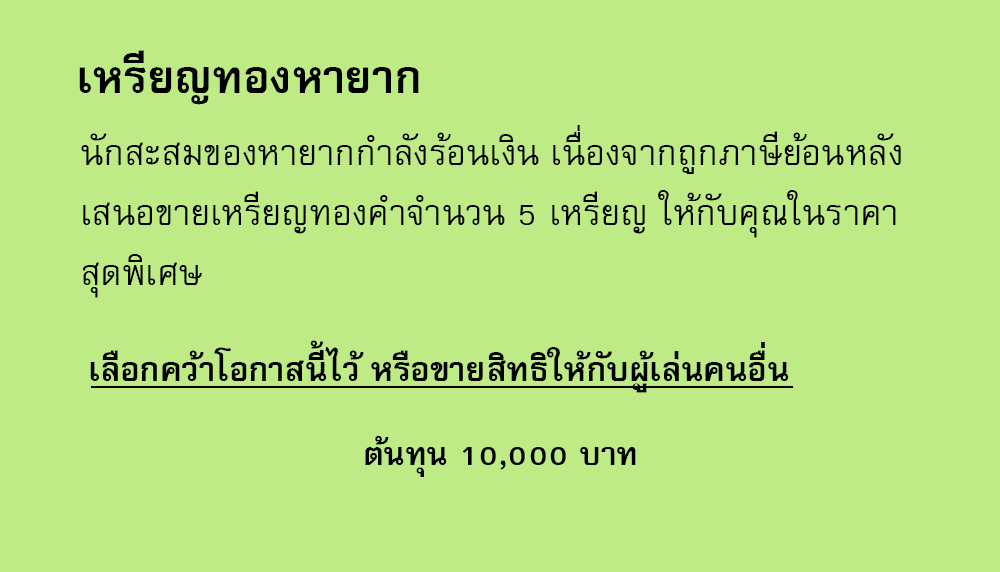
<style>
.page{position:relative;width:1000px;height:572px;background:#beeb85}
.page>*{position:absolute;margin:0}
.t1{font:64px "FreesiaUPCBold";color:#000000}
.t2{font:50px/60px "FreesiaUPC";color:#000000}
.t3{font:47px "FreesiaUPCBold";color:#000000}
.t4{font:45px "FreesiaUPCBold";color:#000000}
</style>
<div class="page">
<p class="t1" style="left:79px;top:50px;width:340px;height:55px">เหรียญทองหายาก</p>
<p class="t2" style="left:81px;top:125px;width:820px;height:173px">นักสะสมของหายากกำลังร้อนเงิน เนื่องจากถูกภาษีย้อนหลัง<br>เสนอขายเหรียญทองคำจำนวน 5 เหรียญ ให้กับคุณในราคา<br>สุดพิเศษ</p>
<p class="t3" style="left:90px;top:340px;width:699px;height:53px">เลือกคว้าโอกาสนี้ไว้ หรือขายสิทธิให้กับผู้เล่นคนอื่น</p>
<p class="t4" style="left:365px;top:436px;width:271px;height:41px">ต้นทุน 10,000 บาท</p>
</div>
